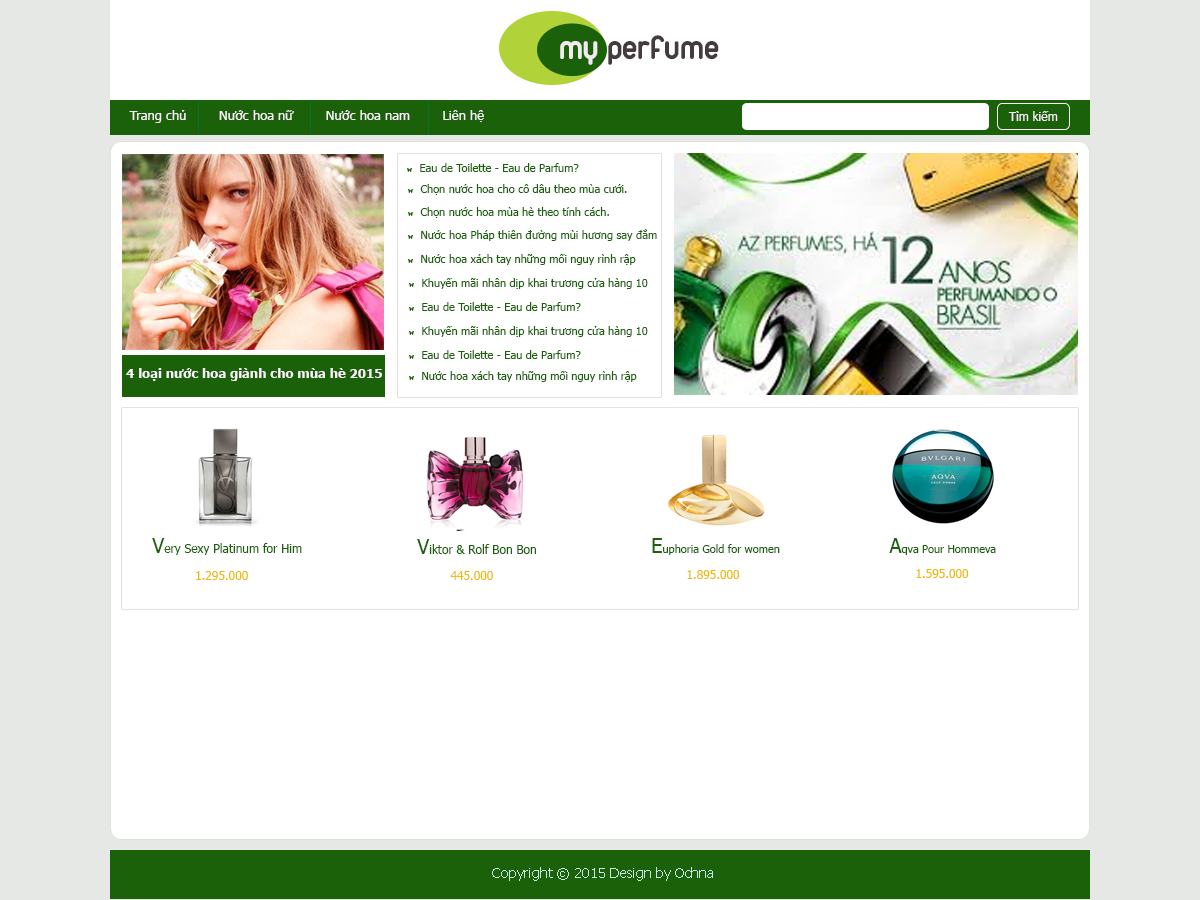
<style>
.page{position:relative;width:1200px;height:900px;background:#ffffff}
.page>*{position:absolute;margin:0}
.t1{font:36px "UTMDuepuntozeroBold";color:#453a40}
.t2{font:36px "UTMDuepuntozeroBold";color:#f3eaef}
.t3{font:13px "Tahoma";color:#faf4fa}
.t4{font:12px "Tahoma";color:#faf4fa}
.t5{font:11px "Tahoma";color:#1b6109}
.t6{font:13px "Tahoma-Bold";color:#faf4fa}
.t7{font:12px "Tahoma";color:#1b6109}
.t8{font:20px "Tahoma";color:#1b6109}
.t9{font:12px "Tahoma";color:#edba07}
.t10{font:14px "Tahoma";color:#c7e8e8}
</style>
<div class="page">
<p class="t1" style="left:560px;top:35px;width:159px;height:30px"><span class="t2">my</span> perfume</p>
<p class="t3" style="left:129px;top:110px;width:355px;height:13px">Trang chủ        Nước hoa nữ        Nước hoa nam        Liên hệ</p>
<p class="t4" style="left:1008px;top:111px;width:50px;height:10px">Tìm kiếm</p>
<p class="t5" style="left:420px;top:163px;width:159px;height:9px">Eau de Toilette - Eau de Parfum?</p>
<p class="t5" style="left:420px;top:184px;width:207px;height:11px">Chọn nước hoa cho cô dâu theo mùa cưới.</p>
<p class="t5" style="left:420px;top:207px;width:189px;height:11px">Chọn nước hoa mùa hè theo tính cách.</p>
<p class="t5" style="left:421px;top:229px;width:236px;height:12px">Nước hoa Pháp thiên đường mùi hương say đắm</p>
<p class="t5" style="left:421px;top:254px;width:215px;height:11px">Nước hoa xách tay những mối nguy rình rập</p>
<p class="t5" style="left:422px;top:278px;width:226px;height:11px">Khuyến mãi nhân dịp khai trương cửa hàng 10</p>
<p class="t5" style="left:422px;top:302px;width:159px;height:9px">Eau de Toilette - Eau de Parfum?</p>
<p class="t5" style="left:422px;top:326px;width:226px;height:11px">Khuyến mãi nhân dịp khai trương cửa hàng 10</p>
<p class="t5" style="left:422px;top:350px;width:159px;height:9px">Eau de Toilette - Eau de Parfum?</p>
<p class="t6" style="left:126px;top:368px;width:256px;height:13px">4 loại nước hoa giành cho mùa hè 2015</p>
<p class="t5" style="left:422px;top:371px;width:215px;height:11px">Nước hoa xách tay những mối nguy rình rập</p>
<p class="t7" style="left:152px;top:538px;width:150px;height:17px"><span class="t8">V</span>ery Sexy Platinum for Him</p>
<p class="t7" style="left:417px;top:539px;width:119px;height:15px"><span class="t8">V</span>iktor &amp; Rolf Bon Bon</p>
<p class="t5" style="left:652px;top:538px;width:128px;height:17px"><span class="t8">E</span>uphoria Gold for women</p>
<p class="t5" style="left:889px;top:538px;width:107px;height:17px"><span class="t8">A</span>qva Pour Hommeva</p>
<p class="t9" style="left:916px;top:569px;width:53px;height:9px">1.595.000</p>
<p class="t9" style="left:196px;top:571px;width:52px;height:9px">1.295.000</p>
<p class="t9" style="left:450px;top:571px;width:43px;height:9px">445.000</p>
<p class="t9" style="left:687px;top:570px;width:53px;height:9px">1.895.000</p>
<p class="t10" style="left:492px;top:867px;width:221px;height:14px">Copyright © 2015 Design by Ochna</p>
</div>
